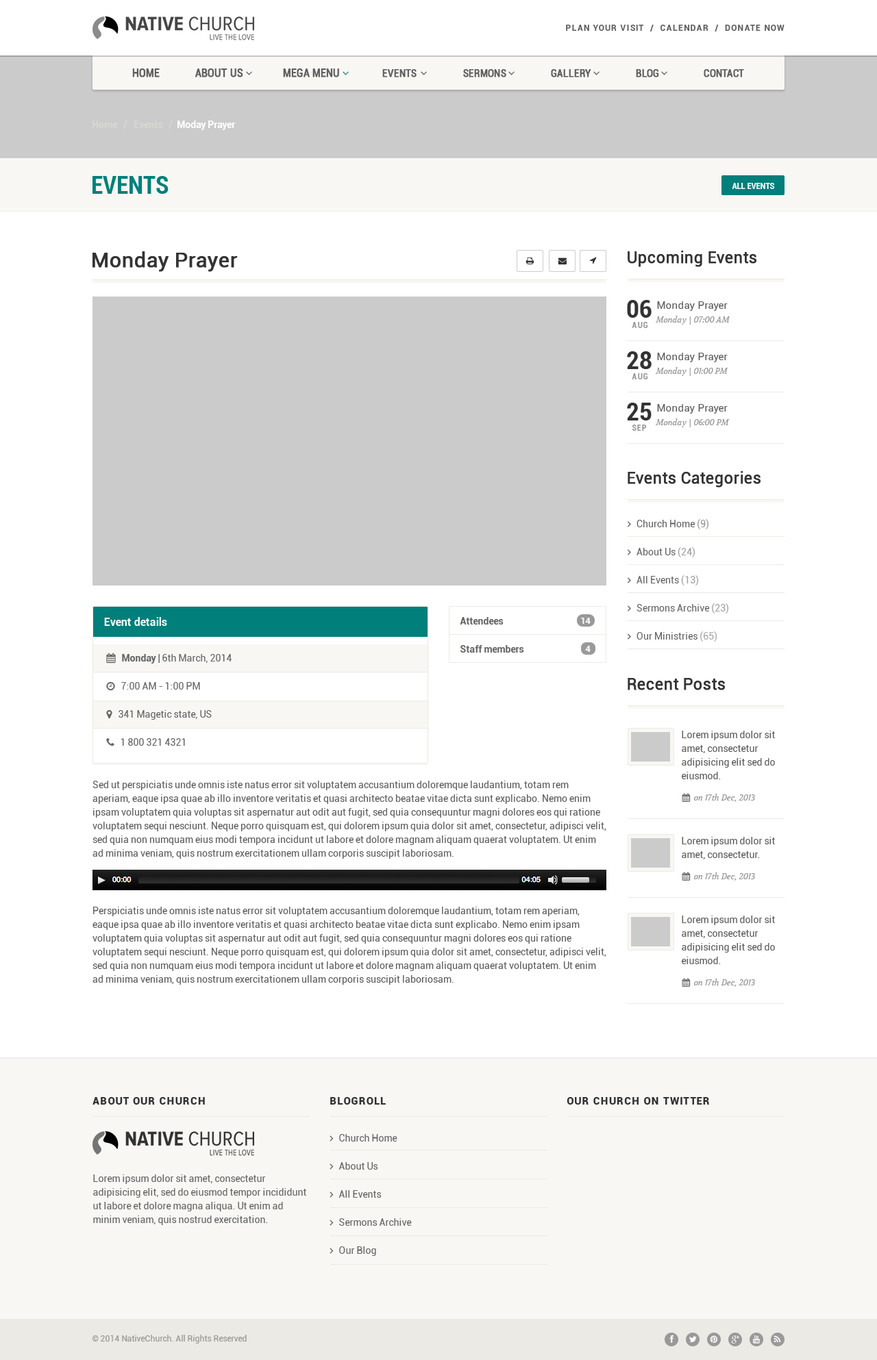
<style>
.page{position:relative;width:877px;height:1360px;background:#ffffff}
.page>*{position:absolute;margin:0}
.t1{font:8.2px "Roboto-Bold";letter-spacing:0.1em;color:#5e5e5e}
.t2{font:9.6px "Roboto-Bold";color:#d8d6d1}
.t3{font:9.6px "Roboto-Bold";color:#ffffff}
.t4{font:24.7px "Roboto-BoldCondensed";color:#007f7b}
.t5{font:8.9px "Roboto-BoldCondensed";color:#ffffff}
.t6{font:20.5px "Roboto-Regular";color:#333333;font-weight:bold}
.t7{font:15.8px "Roboto-Regular";color:#333333;font-weight:bold}
.t8{font:24.7px "Roboto-BoldCondensed";color:#333333}
.t9{font:10.3px "Roboto-Regular";color:#5e5e5e}
.t10{font:8.2px "Volkhov-Italic";color:#999999}
.t11{font:8.2px "Roboto-BoldCondensed";letter-spacing:0.1em;color:#999999}
.t12{font:11px "Roboto-Bold";color:#ffffff}
.t13{font:9.6px/28.1px "Roboto-Bold";color:#666666}
.t14{font:8.9px "Roboto-Bold";color:#ffffff}
.t15{font:9.6px/13.7px "Roboto-Regular";color:#5e5e5e}
.t16{font:10.3px "Roboto-Black";letter-spacing:0.075em;color:#333333}
.t17{font:9.6px/13.7px "Roboto-Regular";color:#666666}
.t18{font:8.2px "Roboto-Regular";color:#999999}
</style>
<div class="page">
<p class="t1" style="left:566px;top:25px;width:218px;height:7px">PLAN YOUR VISIT  /  CALENDAR  /  DONATE NOW</p>
<p class="t2" style="left:92px;top:121px;width:144px;height:9px">Home   /   Events   /<span class="t3">  Moday Prayer</span></p>
<p class="t4" style="left:92px;top:176px;width:76px;height:18px">EVENTS</p>
<p class="t5" style="left:731px;top:183px;width:44px;height:6px">ALL EVENTS</p>
<p class="t6" style="left:92px;top:251px;width:146px;height:21px">Monday Prayer</p>
<p class="t7" style="left:627px;top:251px;width:129px;height:16px">Upcoming Events</p>
<p class="t8" style="left:627px;top:300px;width:24px;height:18px">06</p>
<p class="t9" style="left:657px;top:301px;width:70px;height:10px">Monday Prayer</p>
<p class="t10" style="left:655px;top:316px;width:75px;height:9px">Monday | 07:00 AM</p>
<p class="t11" style="left:631px;top:322px;width:17px;height:6px">AUG</p>
<p class="t8" style="left:627px;top:351px;width:24px;height:18px">28</p>
<p class="t9" style="left:657px;top:353px;width:70px;height:9px">Monday Prayer</p>
<p class="t11" style="left:631px;top:373px;width:17px;height:6px">AUG</p>
<p class="t10" style="left:655px;top:367px;width:73px;height:9px">Monday | 01:00 PM</p>
<p class="t8" style="left:627px;top:403px;width:24px;height:18px">25</p>
<p class="t9" style="left:657px;top:404px;width:70px;height:10px">Monday Prayer</p>
<p class="t11" style="left:631px;top:425px;width:16px;height:6px">SEP</p>
<p class="t10" style="left:655px;top:418px;width:74px;height:9px">Monday | 06:00 PM</p>
<p class="t7" style="left:627px;top:471px;width:133px;height:17px">Events Categories</p>
<p class="t12" style="left:104px;top:617px;width:63px;height:9px">Event details</p>
<p class="t13" style="left:460px;top:617px;width:64px;height:36px">Attendees<br>Staff members</p>
<p class="t14" style="left:581px;top:618px;width:9px;height:6px">14</p>
<p class="t14" style="left:585px;top:646px;width:5px;height:6px">4</p>
<p class="t7" style="left:627px;top:678px;width:98px;height:12px">Recent Posts</p>
<p class="t15" style="left:681px;top:731px;width:94px;height:48px">Lorem ipsum dolor sit amet, consectetur adipisicing elit sed do eiusmod.</p>
<p class="t15" style="left:92px;top:781px;width:514px;height:78px">Sed ut perspiciatis unde omnis iste natus error sit voluptatem accusantium doloremque laudantium, totam rem aperiam, eaque ipsa quae ab illo inventore veritatis et quasi architecto beatae vitae dicta sunt explicabo. Nemo enim ipsam voluptatem quia voluptas sit aspernatur aut odit aut fugit, sed quia consequuntur magni dolores eos qui ratione voluptatem sequi nesciunt. Neque porro quisquam est, qui dolorem ipsum quia dolor sit amet, consectetur, adipisci velit, sed quia non numquam eius modi tempora incidunt ut labore et dolore magnam aliquam quaerat voluptatem. Ut enim ad minima veniam, quis nostrum exercitationem ullam corporis suscipit laboriosam.</p>
<p class="t15" style="left:681px;top:837px;width:94px;height:23px">Lorem ipsum dolor sit amet, consectetur.</p>
<p class="t15" style="left:92px;top:907px;width:514px;height:78px">Perspiciatis unde omnis iste natus error sit voluptatem accusantium doloremque laudantium, totam rem aperiam, eaque ipsa quae ab illo inventore veritatis et quasi architecto beatae vitae dicta sunt explicabo. Nemo enim ipsam voluptatem quia voluptas sit aspernatur aut odit aut fugit, sed quia consequuntur magni dolores eos qui ratione voluptatem sequi nesciunt. Neque porro quisquam est, qui dolorem ipsum quia dolor sit amet, consectetur, adipisci velit, sed quia non numquam eius modi tempora incidunt ut labore et dolore magnam aliquam quaerat voluptatem. Ut enim ad minima veniam, quis nostrum exercitationem ullam corporis suscipit laboriosam.</p>
<p class="t15" style="left:681px;top:916px;width:94px;height:48px">Lorem ipsum dolor sit amet, consectetur adipisicing elit sed do eiusmod.</p>
<p class="t16" style="left:92px;top:1097px;width:113px;height:8px">ABOUT OUR CHURCH</p>
<p class="t16" style="left:330px;top:1097px;width:56px;height:8px">BLOGROLL</p>
<p class="t16" style="left:566px;top:1097px;width:143px;height:8px">OUR CHURCH ON TWITTER</p>
<p class="t17" style="left:93px;top:1175px;width:213px;height:50px">Lorem ipsum dolor sit amet, consectetur adipisicing elit, sed do eiusmod tempor incididunt ut labore et dolore magna aliqua. Ut enim ad minim veniam, quis nostrud exercitation.</p>
<p class="t18" style="left:92px;top:1335px;width:155px;height:9px">© 2014 NativeChurch. All Rights Reserved</p>
</div>
